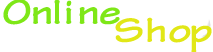
<style>
.page{position:relative;width:213px;height:52px;background:#ffffff}
.page>*{position:absolute;margin:0}
.t1{font:36px "TektonPro-BoldExt";letter-spacing:-0.2em;color:#7ee717}
.t2{font:36px "TektonPro-BoldExt";letter-spacing:-0.2em;color:#e1e717}
</style>
<div class="page">
<p class="t1" style="left:3px;top:0px;width:117px;height:25px">O    n    l      i       n    e</p>
<p class="t2" style="left:115px;top:17px;width:97px;height:36px">S     h     o   p</p>
</div>
